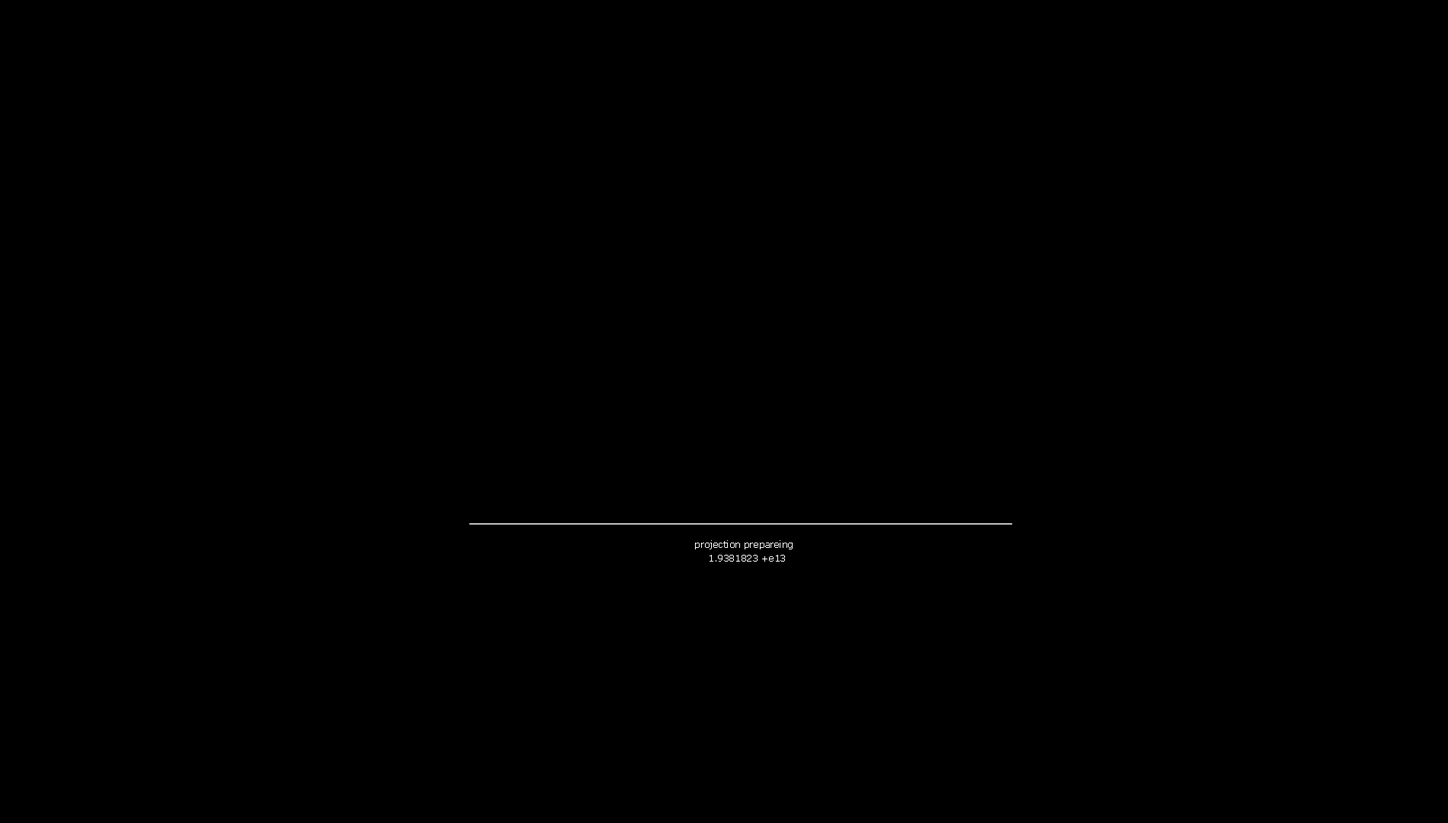
<style>
.page{position:relative;width:1448px;height:823px;background:#000000}
.page>*{position:absolute;margin:0}
.t1{font:9.1px "Verdana";color:#ffffff}
</style>
<div class="page">
<p class="t1" style="left:695px;top:540px;width:98px;height:10px">projection prepareing</p>
<p class="t1" style="left:710px;top:555px;width:75px;height:7px">1.9381823 +e13</p>
</div>
